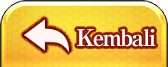
<style>
.page{position:relative;width:168px;height:67px}
.page>*{position:absolute;margin:0}
.t1{font:23px "RyuminPro-ExBold";letter-spacing:-0.08em;color:#ffffff}
</style>
<div class="page">
<p class="t1" style="left:77px;top:29px;width:79px;height:18px">Kembali</p>
</div>
